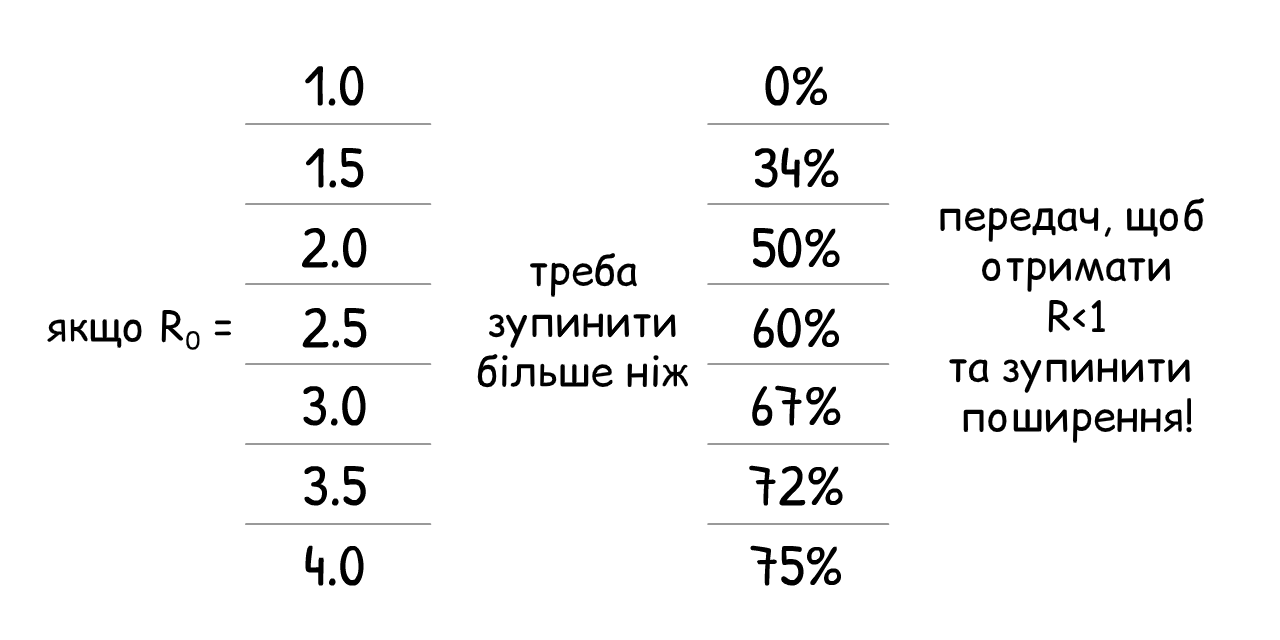
<style>
.page{position:relative;width:1280px;height:640px;background:#ffffff}
.page>*{position:absolute;margin:0}
.t1{font:42px "ComicRelief";color:#000000}
</style>
<div class="page">
<p class="t1" style="left:940px;top:197px;width:265px;height:246px;text-align:center">передач, щоб <br>отримати<br>R&lt;1<br>та зупинити <br>поширення!</p>
<p class="t1" style="left:477px;top:252px;width:212px;height:136px;text-align:center">треба<br>зупинити<br>більше ніж</p>
<p class="t1" style="left:46px;top:309px;width:186px;height:41px">якщо R0 =</p>
</div>
